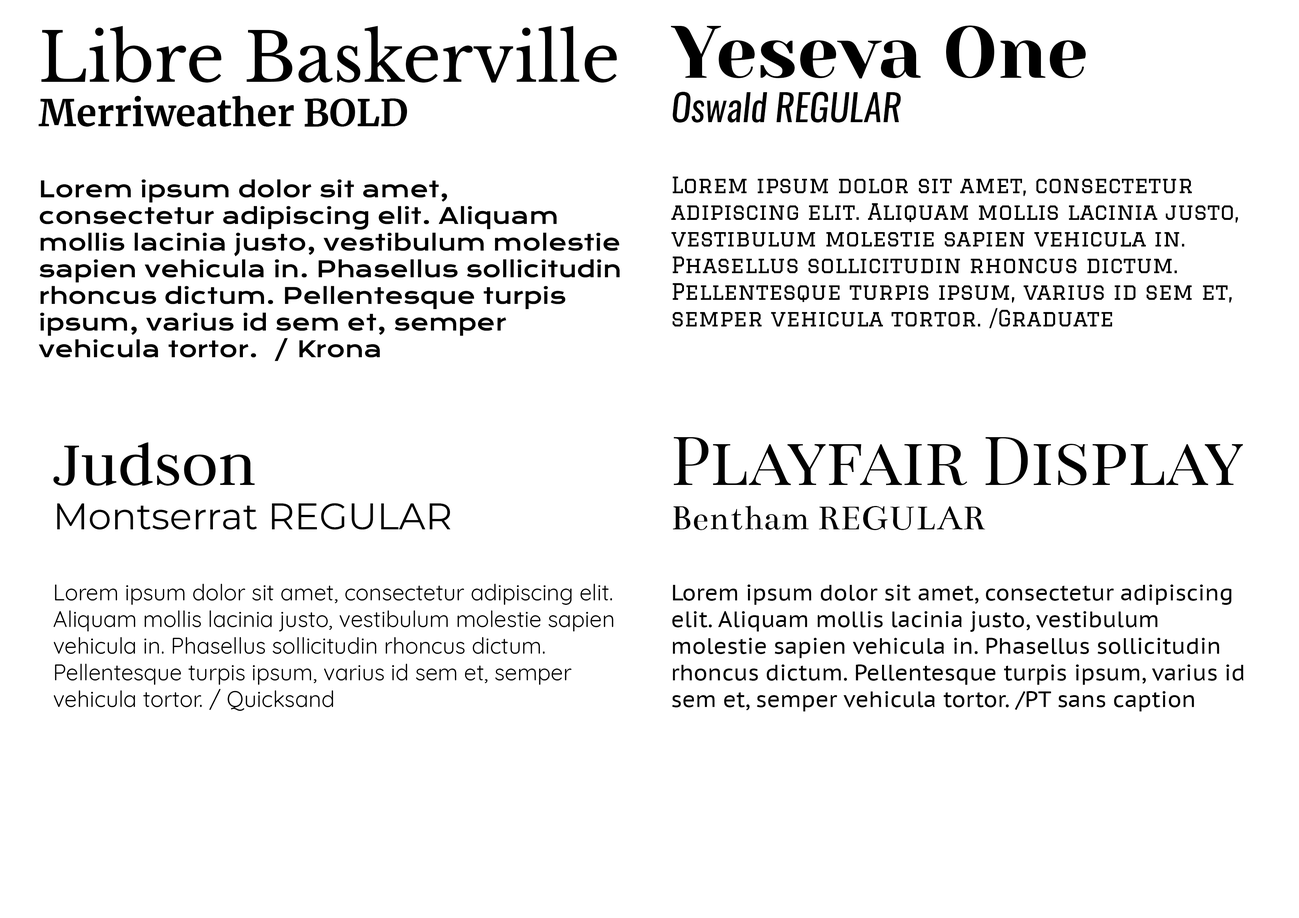
<style>
.page{position:relative;width:1299px;height:918px;background:#ffffff}
.page>*{position:absolute;margin:0}
.t1{font:22.2px "KronaOne-Regular";color:#000000}
.t2{font:67.4px "LibreBaskerville-Regular";color:#000000}
.t3{font:37px "Merriweather-Bold";color:#000000}
.t4{font:22.2px "Graduate-Regular";color:#000000}
.t5{font:74px "YesevaOne-Regular";color:#000000}
.t6{font:37px "Oswald-RegularItalic";color:#000000}
.t7{font:22.2px "PTSans-Caption";color:#000000}
.t8{font:67.4px "PlayfairDisplaySC-Regular";color:#000000}
.t9{font:37px "Bentham-Regular";color:#000000}
.t10{font:22.2px "Quicksand-Regular";color:#000000}
.t11{font:67.4px "Judson-Regular";color:#000000}
.t12{font:37px "Montserrat-Regular";color:#000000}
</style>
<div class="page">
<p class="t1" style="left:39px;top:26px;width:581px;height:335px"><span class="t2">Libre Baskerville<br></span><span class="t3">Merriweather BOLD<br><br></span>Lorem ipsum dolor sit amet, consectetur adipiscing elit. Aliquam mollis lacinia justo, vestibulum molestie sapien vehicula in. Phasellus sollicitudin rhoncus dictum. Pellentesque turpis ipsum, varius id sem et, semper vehicula tortor.  / Krona</p>
<p class="t4" style="left:671px;top:26px;width:567px;height:302px"><span class="t5">Yeseva One<br></span><span class="t6">Oswald REGULAR<br><br></span>Lorem ipsum dolor sit amet, consectetur adipiscing elit. Aliquam mollis lacinia justo, vestibulum molestie sapien vehicula in. Phasellus sollicitudin rhoncus dictum. Pellentesque turpis ipsum, varius id sem et, semper vehicula tortor. /Graduate</p>
<p class="t7" style="left:672px;top:437px;width:571px;height:275px"><span class="t8">Playfair Display<br></span><span class="t9">Bentham REGULAR<br><br></span>Lorem ipsum dolor sit amet, consectetur adipiscing elit. Aliquam mollis lacinia justo, vestibulum molestie sapien vehicula in. Phasellus sollicitudin rhoncus dictum. Pellentesque turpis ipsum, varius id sem et, semper vehicula tortor. /PT sans caption</p>
<p class="t10" style="left:53px;top:442px;width:560px;height:269px"><span class="t11">Judson<br></span><span class="t12">Montserrat REGULAR<br><br></span>Lorem ipsum dolor sit amet, consectetur adipiscing elit. Aliquam mollis lacinia justo, vestibulum molestie sapien vehicula in. Phasellus sollicitudin rhoncus dictum. Pellentesque turpis ipsum, varius id sem et, semper vehicula tortor. / Quicksand</p>
</div>
